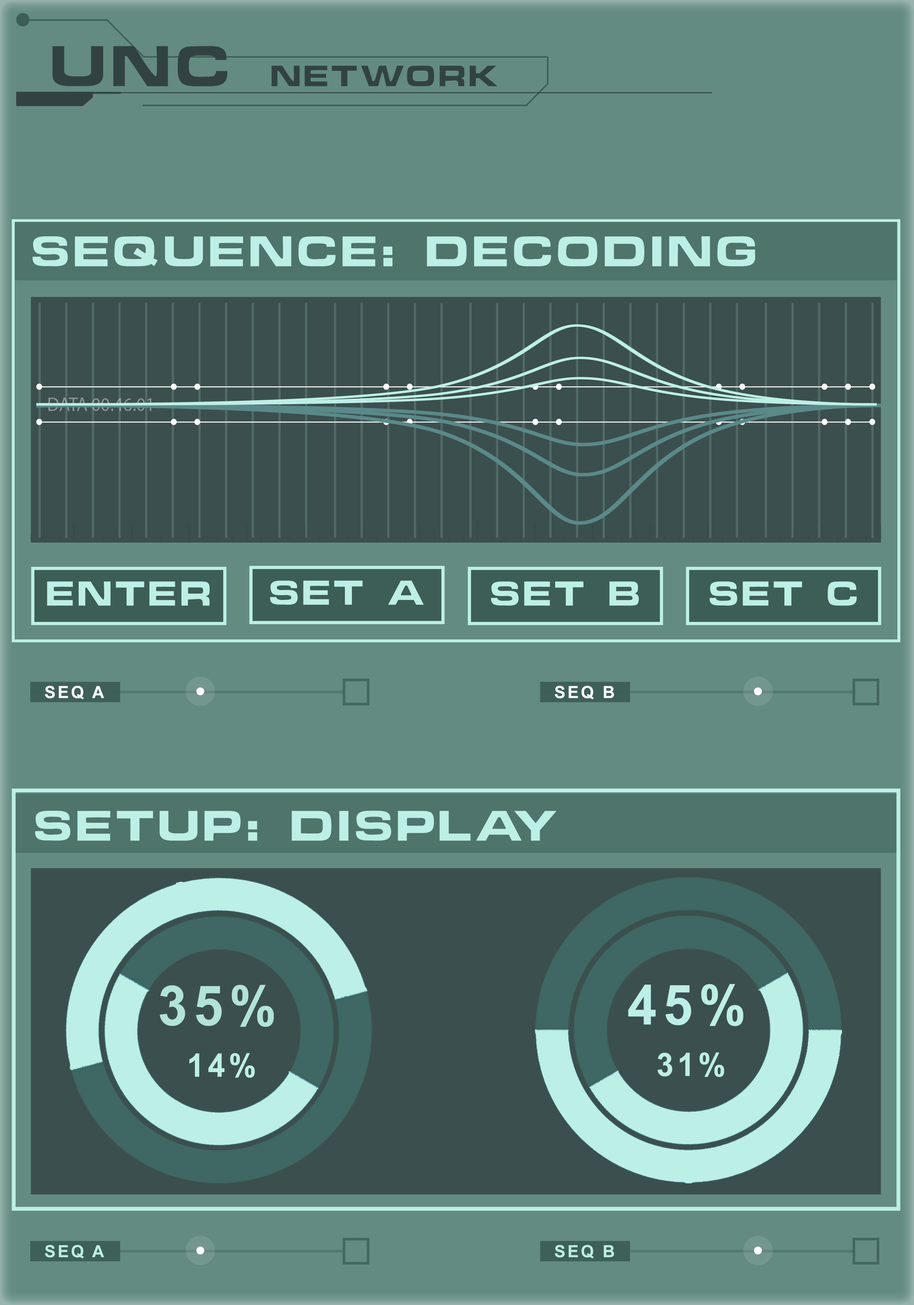
<style>
.page{position:relative;width:914px;height:1305px;background:#638b82}
.page>*{position:absolute;margin:0}
.t1{font:26.9px "ChinoCapsSSK";letter-spacing:0.12em;color:#324242}
.t2{font:52.4px "ChinoCapsSSK";letter-spacing:0.12em;color:#324242}
.t3{font:39.1px "ChinoCapsSSK";letter-spacing:0.12em;color:#bcefe5}
.t4{font:31.6px "ChinoCapsSSK";letter-spacing:0.12em;color:#bcefe5}
.t5{font:16.8px "Arial-BoldMT";letter-spacing:0.12em;color:#ffffff}
.t6{font:39px "ChinoCapsSSK";letter-spacing:0.12em;color:#bcefe5}
.t7{font:55.3px "Arial-BoldMT";letter-spacing:0.12em;color:#b2e3d9;scale:0.96 1}
.t8{font:55.3px "Arial-BoldMT";letter-spacing:0.12em;color:#bcefe5;scale:0.96 1}
.t9{font:32.3px "Arial-BoldMT";letter-spacing:0.12em;color:#bcefe5;scale:0.96 1}
.t10{font:16.8px "Arial-BoldMT";letter-spacing:0.12em;color:#bcefe5}
</style>
<div class="page">
<p class="t1" style="left:52px;top:46px;width:445px;height:40px"><span class="t2">UNC </span>NETWORK</p>
<p class="t3" style="left:32px;top:236px;width:723px;height:30px">SEQUENCE: DECODING</p>
<p class="t4" style="left:47px;top:581px;width:163px;height:24px">ENTER</p>
<p class="t4" style="left:270px;top:580px;width:154px;height:24px">SET A</p>
<p class="t4" style="left:491px;top:581px;width:148px;height:24px">SET B</p>
<p class="t4" style="left:710px;top:581px;width:147px;height:24px">SET C</p>
<p class="t5" style="left:45px;top:685px;width:59px;height:14px">SEQ A</p>
<p class="t5" style="left:555px;top:685px;width:59px;height:14px">SEQ B</p>
<p class="t6" style="left:35px;top:810px;width:522px;height:30px">SETUP: DISPLAY</p>
<p class="t7" style="left:160px;top:984px;width:114px;height:42px">35%</p>
<p class="t8" style="left:628px;top:983px;width:115px;height:43px">45%</p>
<p class="t9" style="left:189px;top:1053px;width:66px;height:24px">14%</p>
<p class="t9" style="left:658px;top:1052px;width:66px;height:25px">31%</p>
<p class="t10" style="left:45px;top:1244px;width:59px;height:14px">SEQ A</p>
<p class="t10" style="left:555px;top:1244px;width:59px;height:14px">SEQ B</p>
</div>
